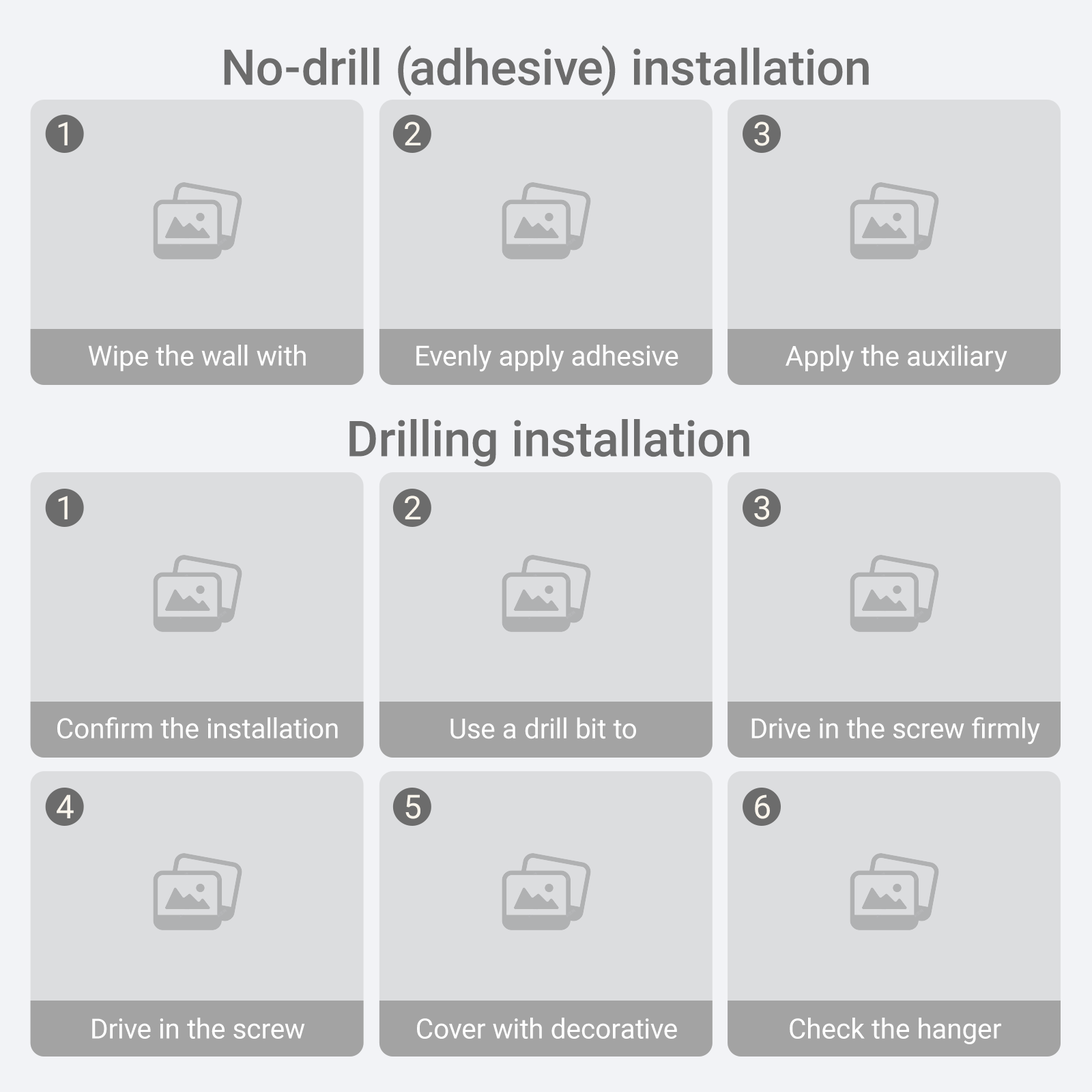
<style>
.page{position:relative;width:1092px;height:1092px;background:#dcdddf}
.page>*{position:absolute;margin:0}
.t1{font:49.5px "Roboto-Medium";color:#6c6c6c}
.t2{font:32.8px "Roboto-Regular";color:#faf5ec}
.t3{font:27.7px "Roboto-Regular";color:#ffffff}
</style>
<div class="page">
<p class="t1" style="left:224px;top:45px;width:645px;height:51px">No-drill (adhesive) installation</p>
<p class="t2" style="left:58px;top:121px;width:10px;height:24px">1</p>
<p class="t2" style="left:405px;top:121px;width:16px;height:24px">2</p>
<p class="t2" style="left:754px;top:121px;width:15px;height:25px">3</p>
<p class="t3" style="left:88px;top:345px;width:218px;height:26px">Wipe the wall with</p>
<p class="t3" style="left:416px;top:345px;width:262px;height:27px">Evenly apply adhesive</p>
<p class="t3" style="left:786px;top:345px;width:221px;height:27px">Apply the auxiliary</p>
<p class="t1" style="left:349px;top:419px;width:400px;height:48px">Drilling installation</p>
<p class="t2" style="left:58px;top:495px;width:10px;height:24px">1</p>
<p class="t2" style="left:405px;top:495px;width:16px;height:24px">2</p>
<p class="t2" style="left:754px;top:495px;width:15px;height:25px">3</p>
<p class="t3" style="left:57px;top:717px;width:281px;height:21px">Confirm the installation</p>
<p class="t3" style="left:450px;top:717px;width:186px;height:22px">Use a drill bit to</p>
<p class="t3" style="left:751px;top:717px;width:289px;height:28px">Drive in the screw firmly</p>
<p class="t2" style="left:57px;top:794px;width:17px;height:24px">4</p>
<p class="t2" style="left:405px;top:794px;width:15px;height:25px">5</p>
<p class="t2" style="left:755px;top:794px;width:15px;height:25px">6</p>
<p class="t3" style="left:92px;top:1018px;width:213px;height:21px">Drive in the screw</p>
<p class="t3" style="left:417px;top:1018px;width:260px;height:21px">Cover with decorative</p>
<p class="t3" style="left:790px;top:1018px;width:211px;height:26px">Check the hanger</p>
</div>
